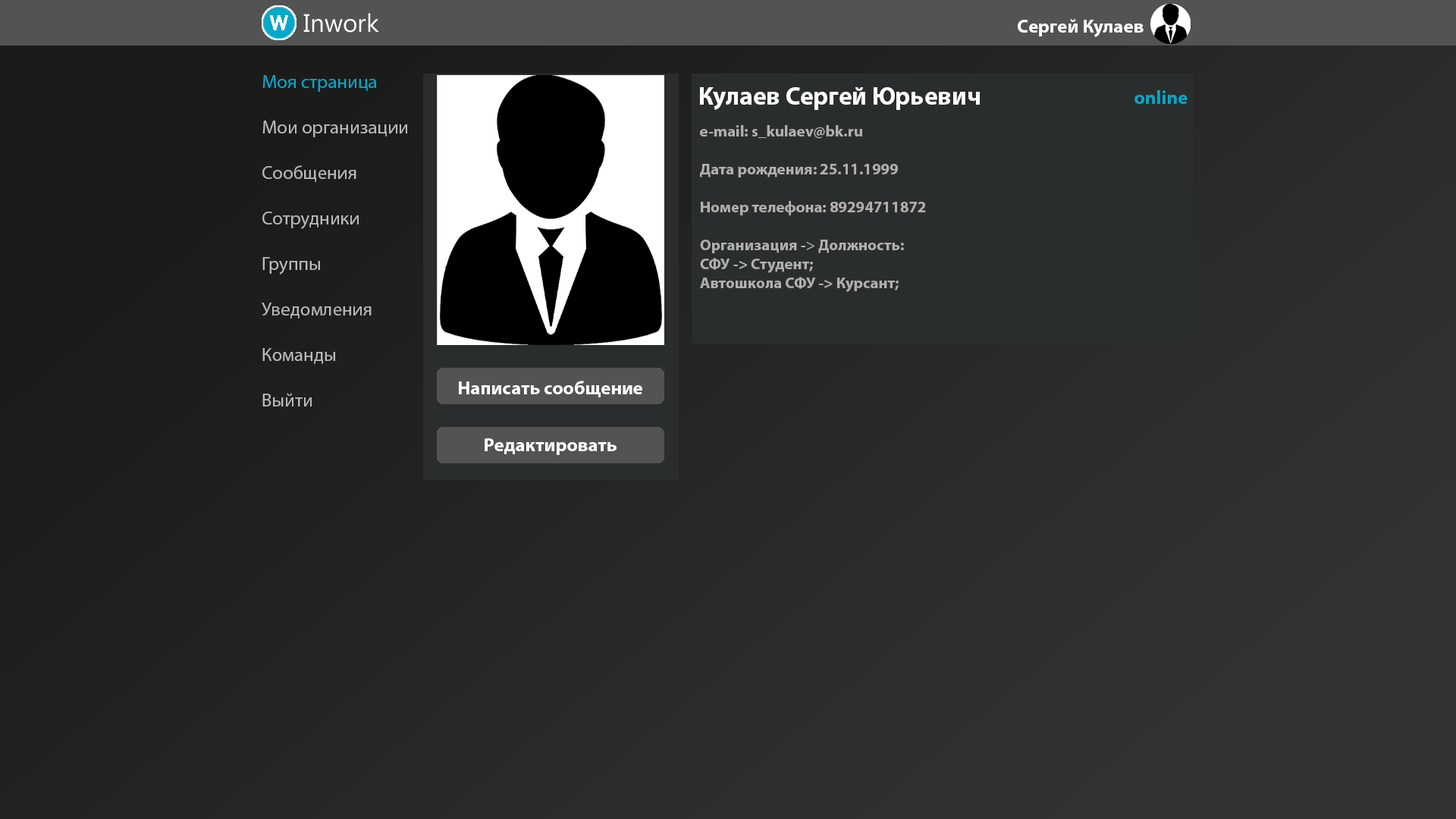
<style>
.page{position:relative;width:1456px;height:819px}
.page>*{position:absolute;margin:0}
.t1{font:19px "MyriadPro-Bold";color:#ffffff}
.t2{font:19px "MyriadPro-Regular";color:#bdb7b7}
.t3{font:19px "MyriadPro-Regular";color:#05a8c8}
.t4{font:25.3px "MyriadPro-Bold";color:#ffffff}
.t5{font:19px "MyriadPro-Bold";color:#05a8c8}
.t6{font:15.8px "MyriadPro-Bold";color:#b1aeae}
.t7{font:15.8px "MyriadPro-Regular";color:#b1aeae}
</style>
<div class="page">
<p class="t1" style="left:1018px;top:19px;width:126px;height:18px">Сергей Кулаев</p>
<p class="t2" style="left:262px;top:75px;width:145px;height:331px"><span class="t3">Моя страница<br></span><br>Мои организации<br><br>Сообщения<br><br>Сотрудники<br><br>Группы<br><br>Уведомления<br><br>Команды<br><br>Выйти</p>
<p class="t4" style="left:700px;top:87px;width:280px;height:23px">Кулаев Сергей Юрьевич</p>
<p class="t5" style="left:1134px;top:90px;width:54px;height:14px">online</p>
<p class="t6" style="left:700px;top:125px;width:226px;height:167px">e-mail: s_kulaev@bk.ru<br><br>Дата рождения: 25.11.1999<br><br>Номер телефона: 89294711872<br><br>Организация -<span class="t7">&gt;</span> Должность: <br>СФУ -&gt; Студент;<br>Автошкола СФУ -&gt; Курсант;</p>
<p class="t1" style="left:459px;top:381px;width:183px;height:16px">Написать сообщение</p>
<p class="t1" style="left:485px;top:438px;width:132px;height:17px">Редактировать</p>
</div>
